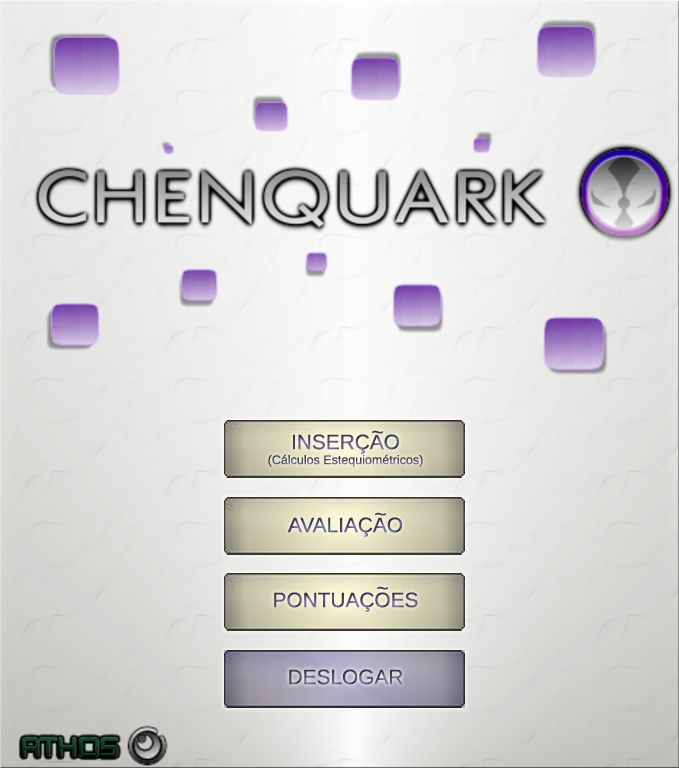
<style>
.page{position:relative;width:679px;height:768px}
.page>*{position:absolute;margin:0}
.t1{font:12.5px "LiberationSans"}
.t2{font:20.8px "LiberationSans"}
.t3{font:20.8px "LiberationSans";color:#3d3c51}
.t4{font:20.8px "LiberationSans";color:#3f3e52}
</style>
<div class="page">
<p class="t1" style="left:268px;top:434px;width:155px;height:33px;text-align:center"><span class="t2">INSERÇAO<br></span>(Cálculos Estequiométricos)</p>
<p class="t3" style="left:372px;top:430px;width:11px;height:4px">~</p>
<p class="t2" style="left:288px;top:517px;width:115px;height:20px">AVALIAÇAO</p>
<p class="t4" style="left:375px;top:512px;width:11px;height:4px">~</p>
<p class="t2" style="left:274px;top:592px;width:144px;height:20px">PONTUAÇOES</p>
<p class="t3" style="left:377px;top:586px;width:11px;height:4px">~</p>
<p class="t2" style="left:289px;top:669px;width:114px;height:16px">DESLOGAR</p>
</div>
